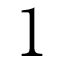
<style>
.page{position:relative;width:64px;height:64px;background:#ffffff}
.page>*{position:absolute;margin:0}
.t1{font:62px "BIZ-UDMincho-Medium";letter-spacing:-0.2em;color:#000000;scale:1.13 1}
</style>
<div class="page">
<p class="t1" style="left:21px;top:7px;width:22px;height:49px">１</p>
</div>
